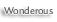
<style>
.page{position:relative;width:57px;height:22px;background:#ffffff}
.page>*{position:absolute;margin:0}
.t1{font:10px "Amira-Roman";color:#666666}
</style>
<div class="page">
<p class="t1" style="left:4px;top:6px;width:49px;height:8px">Wonderous</p>
</div>
